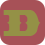
<style>
.page{position:relative;width:45px;height:45px;background:#a75157}
.page>*{position:absolute;margin:0}
.t1{font:50px "Saddlebag-Black";color:#949146}
</style>
<div class="page">
<p class="t1" style="left:3px;top:10px;width:38px;height:26px">D</p>
</div>
